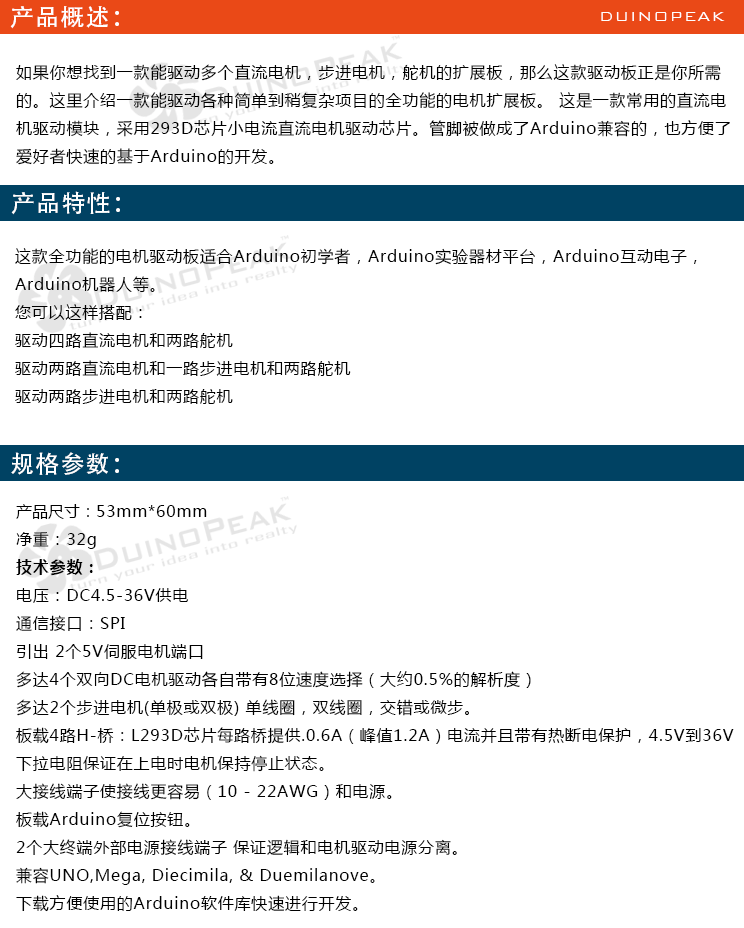
<style>
.page{position:relative;width:744px;height:928px;background:#ffffff}
.page>*{position:absolute;margin:0}
.t1{font:24px "AdobeHeitiStd-Regular";letter-spacing:0.05em;color:#ffffff}
.t2{font:18px "BankGothicBT-Light";letter-spacing:0.05em;color:#ffffff}
.t3{font:16px "MicrosoftYaHei";letter-spacing:0.05em;color:#000000}
.t4{font:16px "MicrosoftYaHei";color:#000000}
.t5{font:16px "MicrosoftYaHei-Bold";letter-spacing:0.05em;color:#000000}
</style>
<div class="page">
<p class="t1" style="left:10px;top:6px;width:109px;height:23px">产品概述：</p>
<p class="t2" style="left:601px;top:12px;width:124px;height:9px">DUINOPEAK</p>
<p class="t3" style="left:16px;top:64px;width:714px;height:101px">如果你想找到一款能驱动多个直流电机，步进电机，舵机的扩展板，那么这款驱动板正是你所需<br>的。这里介绍一款能驱动各种简单到稍复杂项目的全功能的电机扩展板。 这是一款常用的直流电<br>机驱动模块，采用293D芯片小电流直流电机驱动芯片。管脚被做成了Arduino兼容的，也方便了<br>爱好者快速的基于Arduino的开发。</p>
<p class="t1" style="left:11px;top:191px;width:109px;height:24px">产品特性：</p>
<p class="t3" style="left:15px;top:248px;width:682px;height:156px">这款全功能的电机驱动板适合Arduino初学者，Arduino实验器材平台，Arduino互动电子，<br>Arduino机器人等。<br>您可以这样搭配：<br>驱动四路直流电机和两路舵机<br>驱动两路直流电机和一路步进电机和两路舵机<br>驱动两路步进电机和两路舵机</p>
<p class="t1" style="left:11px;top:452px;width:108px;height:23px">规格参数：</p>
<p class="t3" style="left:16px;top:504px;width:718px;height:408px"><span class="t4">产品尺寸：</span>53mm*60mm<br>净重：32g<br><span class="t5">技术参数：<br></span>电压：DC4.5-36V供电<br>通信接口：SPI<br>引出 2个5V伺服电机端口<br>多达4个双向DC电机驱动各自带有8位速度选择（大约0.5%的解析度）<br>多达2个步进电机(单极或双极) 单线圈，双线圈，交错或微步。<br>板载4路H-桥：L293D芯片每路桥提供.0.6A（峰值1.2A）电流并且带有热断电保护，4.5V到36V<br>下拉电阻保证在上电时电机保持停止状态。<br>大接线端子使接线更容易（10 - 22AWG）和电源。<br>板载Arduino复位按钮。<br>2个大终端外部电源接线端子 保证逻辑和电机驱动电源分离。<br>兼容UNO,Mega, Diecimila, &amp; Duemilanove。<br>下载方便使用的Arduino软件库快速进行开发。</p>
</div>
